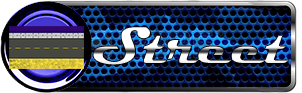
<style>
.page{position:relative;width:302px;height:93px}
.page>*{position:absolute;margin:0}
.t1{font:54.7px "Magneto-Bold"}
</style>
<div class="page">
<p class="t1" style="left:92px;top:26px;width:197px;height:40px">Street</p>
</div>
